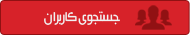
<style>
.page{position:relative;width:190px;height:35px;background:#d72229}
.page>*{position:absolute;margin:0}
.t1{font:15px "Mj_BeirutLtX3";color:#f1f2f2}
</style>
<div class="page">
<p class="t1" style="left:44px;top:11px;width:76px;height:14px">جستجوی کاربران</p>
</div>
